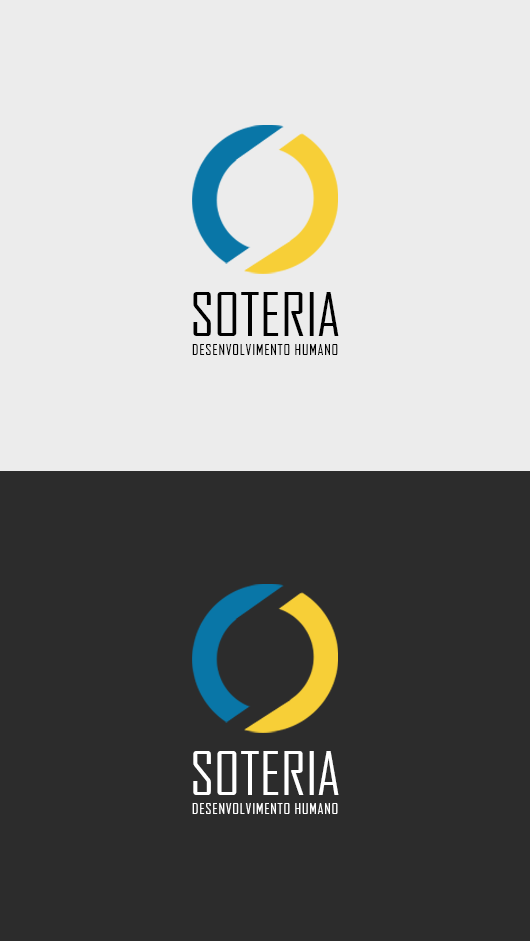
<style>
.page{position:relative;width:530px;height:941px;background:#ececec}
.page>*{position:absolute;margin:0}
.t1{font:58.3px "AgencyFB-Reg";color:#000000;text-transform:uppercase}
.t2{font:15px "AgencyFB-Reg";letter-spacing:0.05em;color:#000000;text-transform:uppercase}
.t3{font:58.3px "AgencyFB-Reg";color:#ffffff;text-transform:uppercase}
.t4{font:15px "AgencyFB-Reg";letter-spacing:0.05em;color:#ffffff;text-transform:uppercase}
</style>
<div class="page">
<p class="t1" style="left:193px;top:292px;width:146px;height:44px">Soteria</p>
<p class="t2" style="left:192px;top:344px;width:146px;height:11px">Desenvolvimento Humano</p>
<p class="t3" style="left:193px;top:751px;width:146px;height:44px">Soteria</p>
<p class="t4" style="left:192px;top:803px;width:146px;height:11px">Desenvolvimento Humano</p>
</div>
